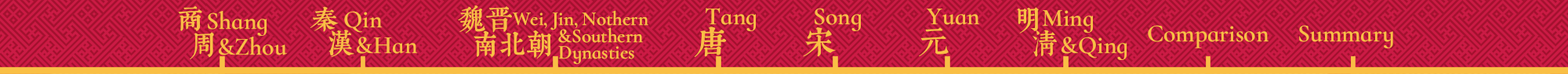
<style>
.page{position:relative;width:1568px;height:74px}
.page>*{position:absolute;margin:0}
.t1{font:27.4px "WenYue-GuDianMingChaoTi-JRFC";color:#f9bf45}
.t2{font:24.8px "WenYue-GuDianMingChaoTi-JRFC";color:#f9bf45}
.t3{font:19.6px "WenYue-GuDianMingChaoTi-JRFC";color:#f9bf45}
.t4{font:31.4px "WenYue-GuDianMingChaoTi-JRFC";color:#f9bf45}
</style>
<div class="page">
<p class="t1" style="left:178px;top:5px;width:24px;height:26px">商</p>
<p class="t1" style="left:458px;top:5px;width:54px;height:29px">魏晋</p>
<p class="t2" style="left:208px;top:11px;width:59px;height:25px">Shang</p>
<p class="t1" style="left:310px;top:6px;width:29px;height:26px">秦</p>
<p class="t2" style="left:344px;top:11px;width:39px;height:22px">Qin</p>
<p class="t3" style="left:512px;top:10px;width:136px;height:21px">Wei, Jin, Nothern</p>
<p class="t2" style="left:706px;top:8px;width:50px;height:23px">Tang</p>
<p class="t2" style="left:815px;top:8px;width:46px;height:23px">Song</p>
<p class="t2" style="left:927px;top:9px;width:53px;height:16px">Yuan</p>
<p class="t1" style="left:1017px;top:7px;width:22px;height:27px">明</p>
<p class="t2" style="left:1042px;top:10px;width:51px;height:23px">Ming</p>
<p class="t1" style="left:328px;top:30px;width:26px;height:28px">汉</p>
<p class="t3" style="left:558px;top:27px;width:85px;height:16px">&amp;Southern</p>
<p class="t4" style="left:694px;top:27px;width:33px;height:31px">唐</p>
<p class="t4" style="left:803px;top:27px;width:33px;height:30px">宋</p>
<p class="t4" style="left:919px;top:27px;width:30px;height:30px">元</p>
<p class="t1" style="left:1033px;top:30px;width:24px;height:27px">清</p>
<p class="t2" style="left:1148px;top:25px;width:121px;height:24px">Comparison</p>
<p class="t2" style="left:1299px;top:25px;width:94px;height:24px">Summary</p>
<p class="t1" style="left:190px;top:32px;width:24px;height:28px">周</p>
<p class="t2" style="left:219px;top:37px;width:68px;height:19px">&amp;Zhou</p>
<p class="t2" style="left:357px;top:37px;width:61px;height:17px">&amp;Han</p>
<p class="t1" style="left:474px;top:31px;width:77px;height:29px">南北朝</p>
<p class="t2" style="left:1062px;top:37px;width:65px;height:23px">&amp;Qing</p>
<p class="t3" style="left:558px;top:46px;width:76px;height:19px">Dynasties</p>
</div>
